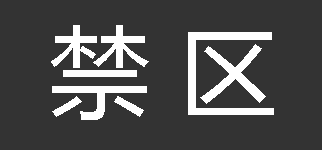
<style>
.page{position:relative;width:322px;height:150px;background:#333333}
.page>*{position:absolute;margin:0}
.t1{font:100px "MicrosoftYaHei";color:#ffffff}
</style>
<div class="page">
<p class="t1" style="left:51px;top:25px;width:223px;height:95px">禁 区</p>
</div>
